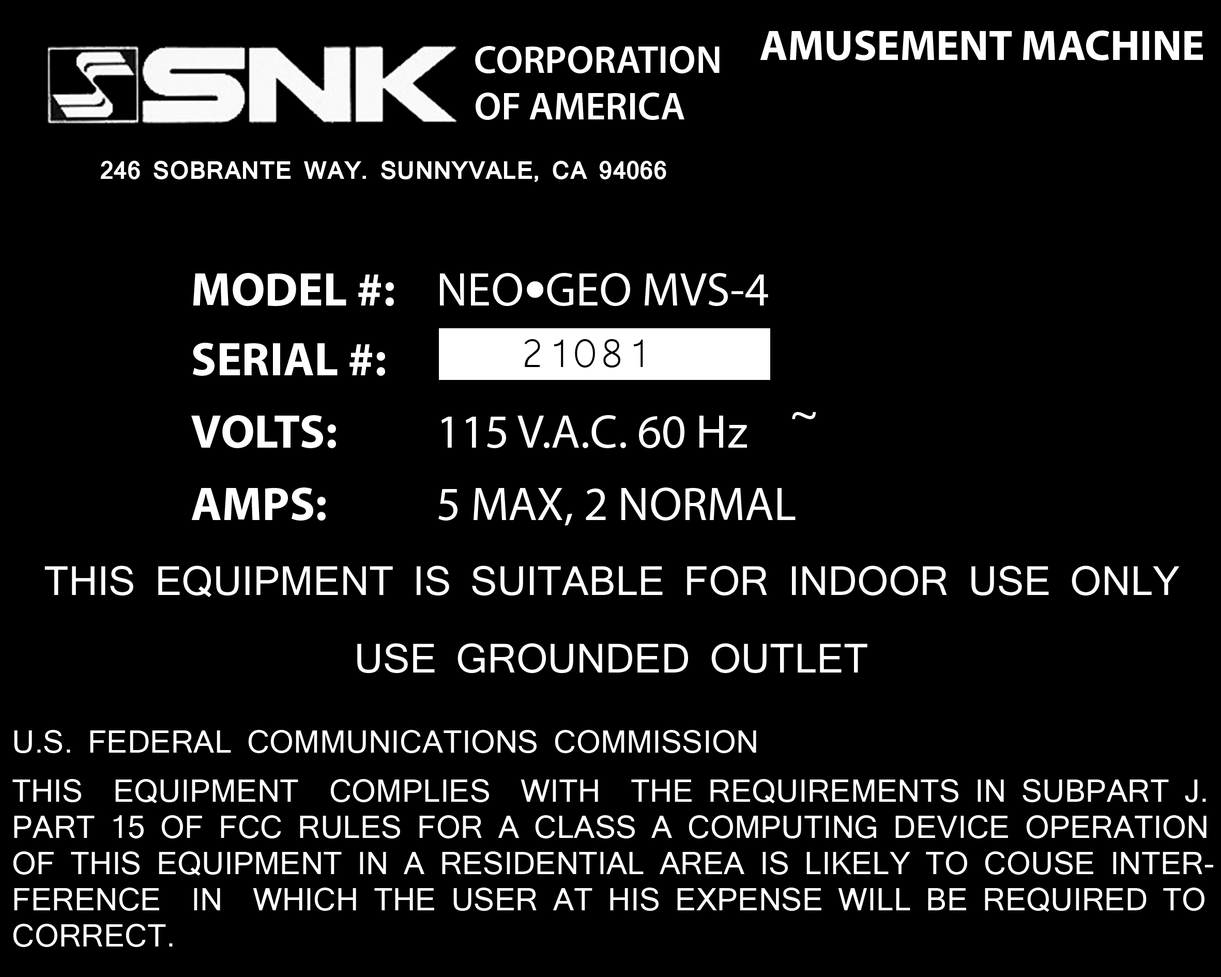
<style>
.page{position:relative;width:1221px;height:977px;background:#000000}
.page>*{position:absolute;margin:0}
.t1{font:43.1px "MyriadPro-Bold";color:#ffffff}
.t2{font:38.8px "MyriadPro-Semibold";color:#ffffff}
.t3{font:23.7px "Mangal-Bold";color:#ffffff}
.t4{font:47.4px "MyriadPro-Regular";color:#ffffff}
.t5{font:47.4px "MyriadPro-Bold";color:#ffffff}
.t6{font:78.3px "MyriadPro-Regular";color:#ffffff}
.t7{font:51.7px "Microsoft-Yi-Baiti";color:#000000}
.t8{font:38.8px "Mangal";color:#ffffff}
.t9{font:30.1px "Mangal";color:#ffffff}
</style>
<div class="page">
<p class="t1" style="left:760px;top:30px;width:443px;height:30px">AMUSEMENT MACHINE</p>
<p class="t2" style="left:475px;top:46px;width:244px;height:74px">CORPORATION<br>OF AMERICA</p>
<p class="t3" style="left:100px;top:161px;width:566px;height:21px">246 SOBRANTE WAY. SUNNYVALE, CA 94066</p>
<p class="t4" style="left:193px;top:273px;width:575px;height:33px"><span class="t5">MODEL #:  </span>NEO GEO MVS-4</p>
<p class="t6" style="left:527px;top:281px;width:16px;height:17px">•</p>
<p class="t7" style="left:524px;top:339px;width:119px;height:28px">21081</p>
<p class="t5" style="left:193px;top:343px;width:192px;height:33px">SERIAL #:</p>
<p class="t4" style="left:792px;top:412px;width:24px;height:7px">~</p>
<p class="t4" style="left:191px;top:415px;width:556px;height:33px"><span class="t5">VOLTS:     </span>115 V.A.C. 60 Hz</p>
<p class="t4" style="left:191px;top:487px;width:604px;height:39px"><span class="t5">AMPS:     </span>5 MAX, 2 NORMAL</p>
<p class="t8" style="left:44px;top:565px;width:1135px;height:32px">THIS EQUIPMENT IS SUITABLE FOR INDOOR USE ONLY</p>
<p class="t8" style="left:357px;top:643px;width:510px;height:30px">USE GROUNDED OUTLET</p>
<p class="t9" style="left:14px;top:730px;width:742px;height:23px">U.S. FEDERAL COMMUNICATIONS COMMISSION</p>
<p class="t9" style="left:12px;top:779px;width:1201px;height:168px">THIS  EQUIPMENT  COMPLIES  WITH  THE REQUIREMENTS IN SUBPART J.<br>PART 15 OF FCC RULES FOR A CLASS A COMPUTING DEVICE OPERATION<br>OF THIS EQUIPMENT IN A RESIDENTIAL AREA IS LIKELY TO COUSE INTER-<br>FERENCE  IN  WHICH THE USER AT HIS EXPENSE WILL BE REQUIRED TO<br>CORRECT.</p>
</div>
